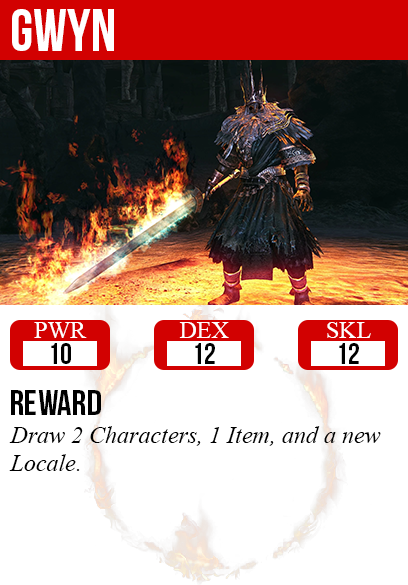
<style>
.page{position:relative;width:408px;height:585px;background:#ffffff}
.page>*{position:absolute;margin:0}
.t1{font:60px "BebasNeue";color:#ffffff}
.t2{font:24px "TimesNewRomanPSMT";color:#ffffff}
.t3{font:30px "BebasNeue";color:#000000}
.t4{font:36px "BebasNeue";color:#000000}
.t5{font:24px "TimesNewRomanPS-ItalicMT";color:#000000}
</style>
<div class="page">
<p class="t1" style="left:12px;top:9px;width:102px;height:42px">gwyn</p>
<p class="t2" style="left:34px;top:322px;width:53px;height:16px">PWR</p>
<p class="t2" style="left:179px;top:322px;width:50px;height:16px">DEX</p>
<p class="t2" style="left:327px;top:322px;width:44px;height:16px">SKL</p>
<p class="t3" style="left:51px;top:343px;width:20px;height:21px">10</p>
<p class="t3" style="left:195px;top:343px;width:20px;height:21px">12</p>
<p class="t3" style="left:339px;top:343px;width:20px;height:21px">12</p>
<p class="t4" style="left:11px;top:390px;width:90px;height:25px">reward</p>
<p class="t5" style="left:9px;top:426px;width:372px;height:45px">Draw 2 Characters, 1 Item, and a new<br>Locale.</p>
</div>
